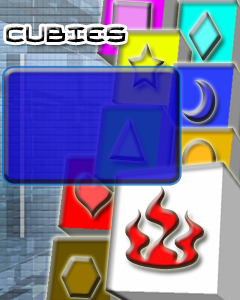
<style>
.page{position:relative;width:240px;height:300px}
.page>*{position:absolute;margin:0}
.t1{font:27px "ThundergodII";color:#040000;scale:0.8 1}
</style>
<div class="page">
<p class="t1" style="left:6px;top:26px;width:120px;height:17px">CUBIES</p>
</div>
